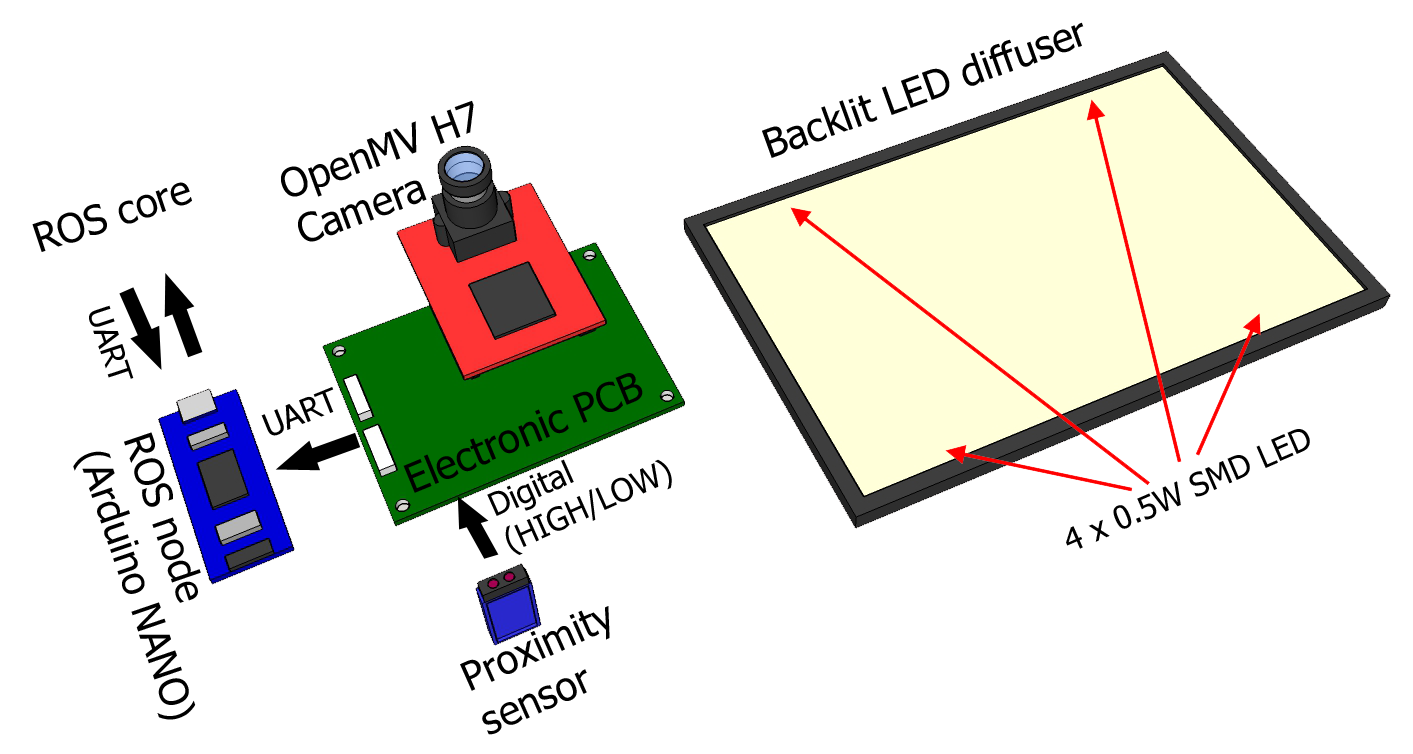
<style>
.page{position:relative;width:1413px;height:754px;background:#ffffff}
.page>*{position:absolute;margin:0}
.t1{font:40px "Tahoma";color:#000000}
.t2{font:32px "Tahoma";color:#000000}
</style>
<div class="page">
<p class="t1" style="left:762px;top:22px;width:322px;height:136px;rotate:-20deg">Backlit LED diffuser</p>
<p class="t1" style="left:281px;top:100px;width:193px;height:142px;rotate:-20deg">OpenMV H7<br>Camera</p>
<p class="t1" style="left:32px;top:182px;width:160px;height:70px;rotate:-18deg">ROS core</p>
<p class="t2" style="left:89px;top:305px;width:45px;height:74px;rotate:72deg">UART</p>
<p class="t1" style="left:403px;top:373px;width:240px;height:120px;rotate:-22deg">Electronic PCB</p>
<p class="t2" style="left:261px;top:387px;width:73px;height:49px;rotate:-22deg">UART</p>
<p class="t1" style="left:73px;top:432px;width:128px;height:288px;rotate:71deg">ROS node<br>(Arduino NANO)</p>
<p class="t2" style="left:1066px;top:429px;width:244px;height:120px;rotate:-24deg">4 x 0.5W SMD LED</p>
<p class="t2" style="left:487px;top:459px;width:185px;height:96px;rotate:-24deg">Digital <br>(HIGH/LOW)</p>
<p class="t1" style="left:460px;top:606px;width:150px;height:129px;rotate:-24deg">Proximity<br>sensor</p>
</div>
